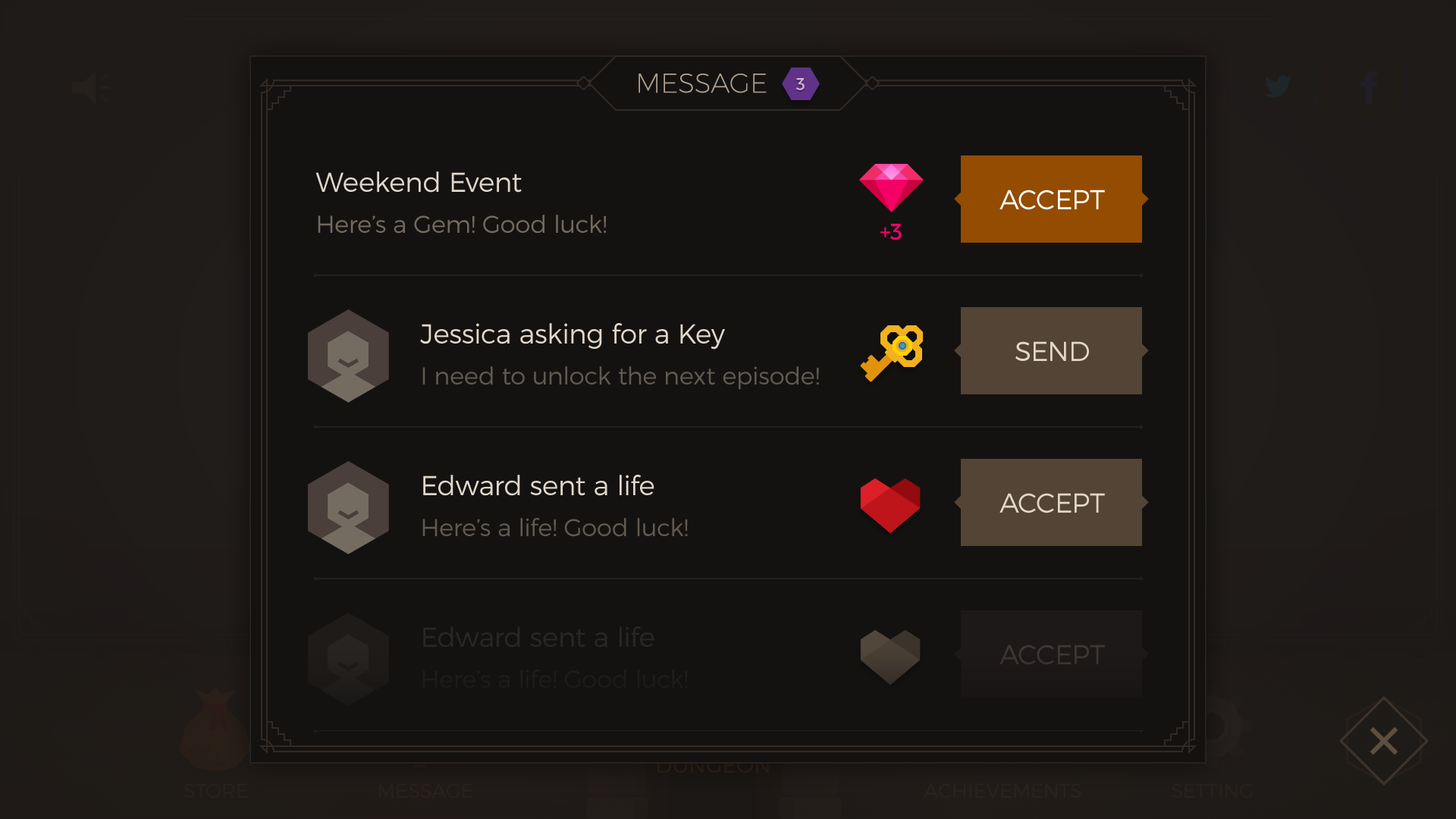
<style>
.page{position:relative;width:1456px;height:819px;background:#141211}
.page>*{position:absolute;margin:0}
.t1{font:27.2px "Montserrat-UltraLight";color:#aea190;text-transform:uppercase}
.t2{font:17.1px "Montserrat-Regular";color:#dab1d1;text-transform:uppercase}
.t3{font:27.3px "Montserrat-Light";color:#e1d7ca}
.t4{font:27.3px "Montserrat-Light";color:#ffffff;text-transform:uppercase}
.t5{font:24.3px "Montserrat-Light";color:#726a5e}
.t6{font:22.7px "Montserrat-Regular";color:#f40066;text-transform:uppercase}
.t7{font:27.3px "Montserrat-Light";color:#e1d7ca;text-transform:uppercase}
.t8{font:24.3px "Montserrat-Light";color:#615a51}
.t9{font:27.3px "Montserrat-Light";color:#292624}
.t10{font:27.3px "Montserrat-Light";color:#403835;text-transform:uppercase}
.t11{font:24.3px "Montserrat-Light";color:#1e1b19}
</style>
<div class="page">
<p class="t1" style="left:639px;top:74px;width:128px;height:19px">message</p>
<p class="t2" style="left:795px;top:78px;width:10px;height:12px">3</p>
<p class="t3" style="left:315px;top:171px;width:207px;height:22px">Weekend Event</p>
<p class="t4" style="left:999px;top:190px;width:106px;height:20px">Accept</p>
<p class="t5" style="left:318px;top:215px;width:289px;height:19px">Here’s a Gem! Good luck!</p>
<p class="t6" style="left:880px;top:224px;width:22px;height:16px">+3</p>
<p class="t3" style="left:420px;top:323px;width:305px;height:27px">Jessica asking for a Key</p>
<p class="t7" style="left:1015px;top:341px;width:74px;height:20px">Send</p>
<p class="t8" style="left:422px;top:366px;width:397px;height:24px">I need to unlock the next episode!</p>
<p class="t3" style="left:423px;top:475px;width:231px;height:21px">Edward sent a life</p>
<p class="t7" style="left:999px;top:493px;width:106px;height:20px">Accept</p>
<p class="t8" style="left:422px;top:518px;width:266px;height:19px">Here’s a life! Good luck!</p>
<p class="t9" style="left:423px;top:626px;width:231px;height:22px">Edward sent a life</p>
<p class="t10" style="left:999px;top:645px;width:106px;height:20px">Accept</p>
<p class="t11" style="left:422px;top:670px;width:266px;height:19px">Here’s a life! Good luck!</p>
</div>
